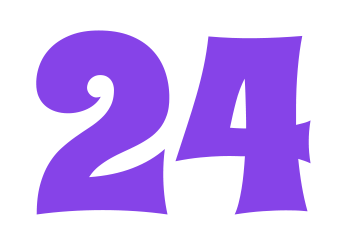
<style>
.page{position:relative;width:354px;height:236px;background:#ffffff}
.page>*{position:absolute;margin:0}
.t1{font:250px "SpicyRice-Regular";color:#8643e8}
</style>
<div class="page">
<p class="t1" style="left:36px;top:30px;width:275px;height:185px">24</p>
</div>
